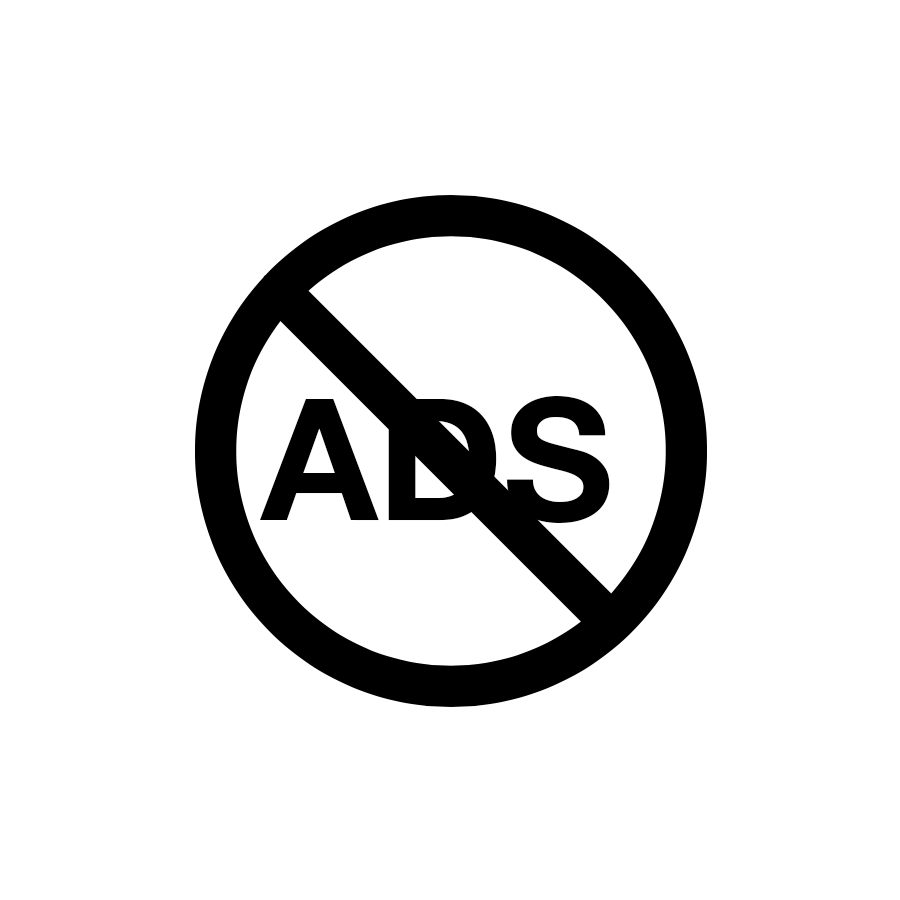
<style>
.page{position:relative;width:900px;height:900px;background:#ffffff}
.page>*{position:absolute;margin:0}
.t1{font:170px "HelveticaNeue-Bold";color:#000000}
</style>
<div class="page">
<p class="t1" style="left:259px;top:396px;width:351px;height:127px">ADS</p>
</div>
